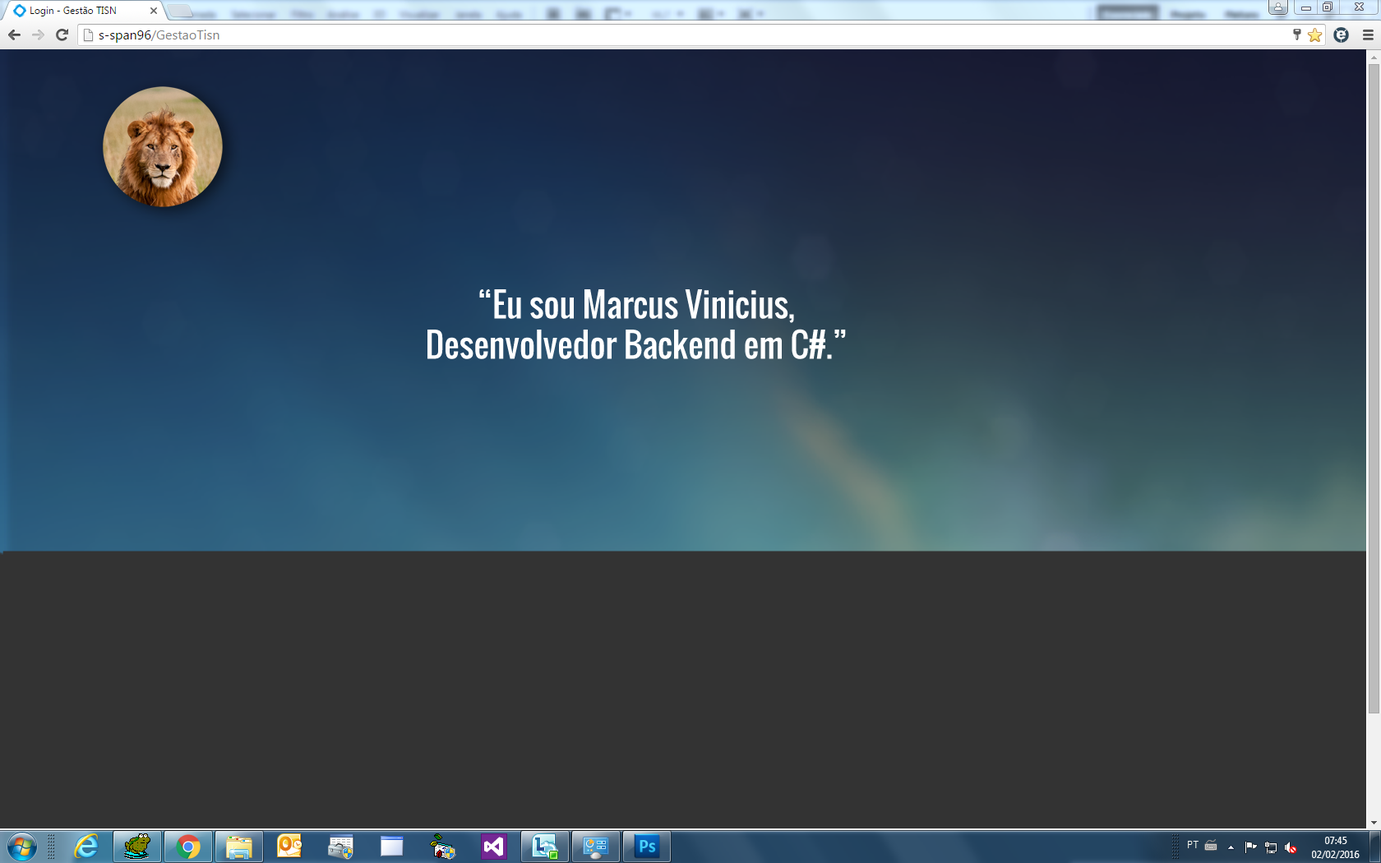
<style>
.page{position:relative;width:1381px;height:863px;background:#333333}
.page>*{position:absolute;margin:0}
.t1{font:33.6px "Oswald-Regular";color:#ffffff}
</style>
<div class="page">
<p class="t1" style="left:428px;top:289px;width:418px;height:70px;text-align:center">“Eu sou Marcus Vinicius,<br>Desenvolvedor Backend em C#.”</p>
</div>
